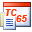
<style>
.page{position:relative;width:32px;height:32px;background:#ffffff}
.page>*{position:absolute;margin:0}
.t1{font:10px "FranklinGothic-DemiItalic";color:#ff3401}
.t2{font:10px "ArialNarrow-BoldItalic";color:#ff3401}
.t3{font:10px "Arial-BoldItalicMT";color:#ff3401}
</style>
<div class="page">
<p class="t1" style="left:5px;top:9px;width:6px;height:7px">T</p>
<p class="t2" style="left:11px;top:9px;width:6px;height:7px">C</p>
<p class="t3" style="left:16px;top:15px;width:6px;height:7px">6</p>
<p class="t3" style="left:21px;top:15px;width:6px;height:7px">5</p>
</div>
